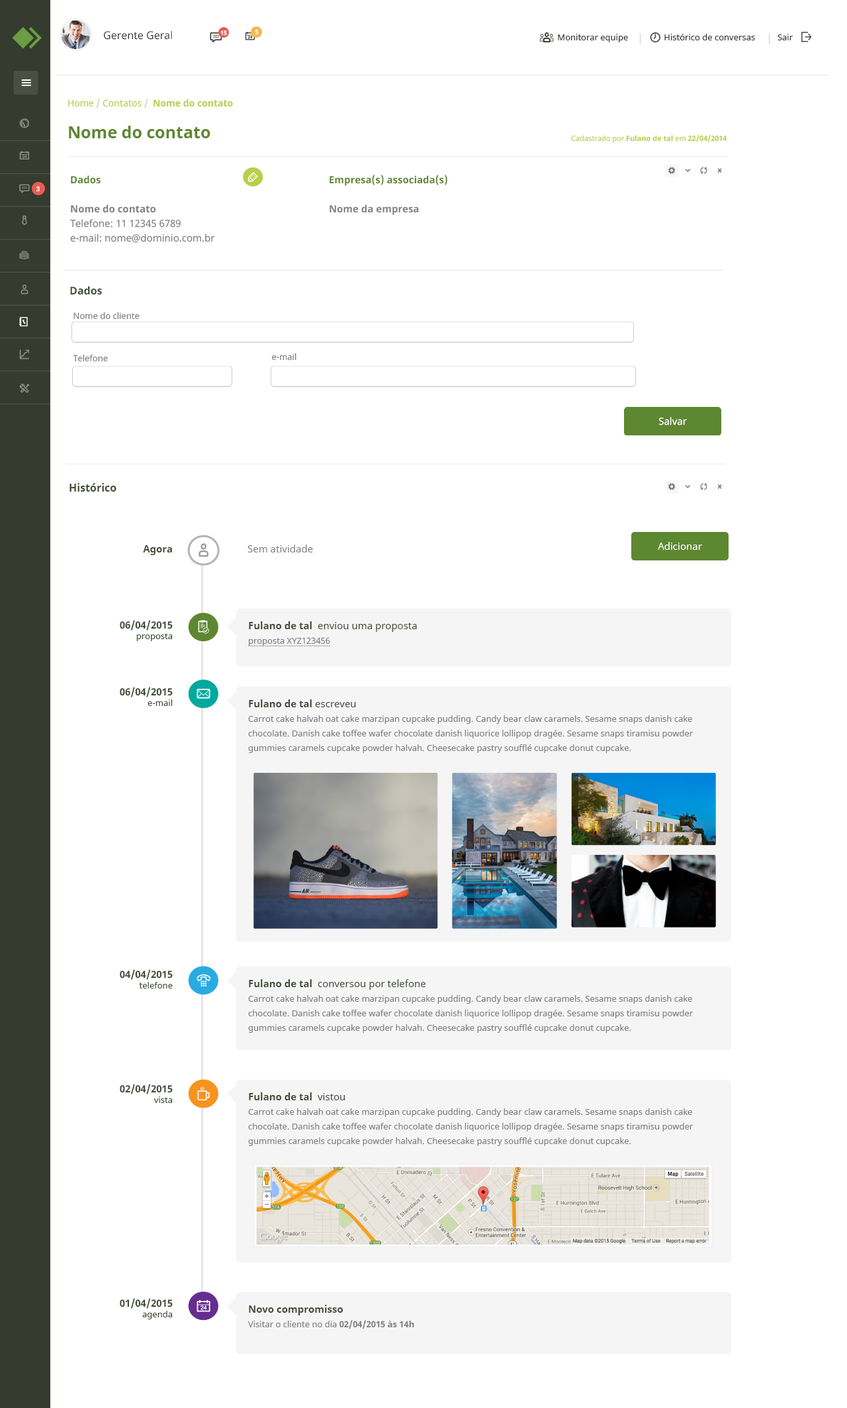
<style>
.page{position:relative;width:847px;height:1408px;background:#ffffff}
.page>*{position:absolute;margin:0}
.t1{font:6.6px "NotoSans-Bold";color:#ffffff}
.t2{font:10.6px "NotoSans";color:#353b2f}
.t3{font:6px "NotoSans-Bold";color:#ffffff}
.t4{font:8.6px "NotoSans";color:#353b2f}
.t5{font:9.3px "NotoSans-Bold";color:#b8cf49}
.t6{font:9.3px "NotoSans";color:#b8cf49}
.t7{font:9.3px "NotoSans";color:#c7cfa1}
.t8{font:16.5px "NotoSans-Bold";color:#5d8730}
.t9{font:7.3px "NotoSans";color:#b8cf49}
.t10{font:7.3px "NotoSans-Bold";color:#b8cf49}
.t11{font:9.9px/14.6px "NotoSans";color:#808080}
.t12{font:9.9px/14.6px "NotoSans-Bold";color:#5d8730}
.t13{font:9.9px/14.6px "NotoSans-Bold";color:#808080}
.t14{font:10.6px "NotoSans-Bold";color:#424d38}
.t15{font:8.6px/43px "NotoSans";color:#808080}
.t16{font:8.6px "NotoSans";color:#808080}
.t17{font:9.9px "NotoSans";color:#ffffff}
.t18{font:9.9px "NotoSans-Bold";color:#424d38}
.t19{font:9.9px "NotoSans";color:#808080}
.t20{font:8.6px "NotoSans";color:#424d38}
.t21{font:9.9px/14.6px "NotoSans";color:#424d38}
.t22{font:9.9px/14.6px "NotoSans-Bold";color:#424d38}
.t23{font:8.6px/14.6px "NotoSans";color:#808080;text-decoration:underline}
.t24{font:8.6px/14.6px "NotoSans";color:#808080}
.t25{font:8.6px/14.6px "NotoSans-Bold";color:#808080}
</style>
<div class="page">
<p class="t1" style="left:255px;top:29px;width:4px;height:6px">5</p>
<p class="t2" style="left:104px;top:30px;width:68px;height:10px">Gerente Geral</p>
<p class="t3" style="left:220px;top:30px;width:7px;height:6px">15</p>
<p class="t4" style="left:558px;top:34px;width:235px;height:8px">Monitorar equipe                Histórico de conversas          Sair</p>
<p class="t5" style="left:68px;top:99px;width:165px;height:10px"><span class="t6">Home </span><span class="t7">/</span><span class="t6"> Contatos </span><span class="t7">/  </span>Nome do contato</p>
<p class="t8" style="left:69px;top:126px;width:141px;height:12px">Nome do contato</p>
<p class="t9" style="left:571px;top:134px;width:156px;height:9px">Cadastrado por<span class="t10"> Fulano de tal </span>em<span class="t10"> 22/04/2014</span></p>
<p class="t1" style="left:36px;top:186px;width:4px;height:6px">3</p>
<p class="t11" style="left:70px;top:175px;width:145px;height:68px"><span class="t12">Dados<br><br></span><span class="t13">Nome do contato<br></span>Telefone: 11 12345 6789<br>e-mail: nome@dominio.com.br</p>
<p class="t12" style="left:330px;top:175px;width:117px;height:40px">Empresa(s) associada(s)<br><br><span class="t13">Nome da empresa</span></p>
<p class="t14" style="left:70px;top:286px;width:32px;height:9px">Dados</p>
<p class="t15" style="left:73px;top:312px;width:67px;height:50px">Nome do cliente<br>Telefone</p>
<p class="t16" style="left:272px;top:353px;width:24px;height:8px">e-mail</p>
<p class="t17" style="left:658px;top:417px;width:29px;height:8px">Salvar</p>
<p class="t14" style="left:69px;top:483px;width:47px;height:9px">Histórico</p>
<p class="t18" style="left:143px;top:545px;width:29px;height:10px">Agora</p>
<p class="t19" style="left:247px;top:545px;width:66px;height:7px">Sem atividade</p>
<p class="t17" style="left:658px;top:542px;width:44px;height:8px">Adicionar</p>
<p class="t18" style="left:120px;top:620px;width:53px;height:21px;text-align:right">06/04/2015<br><span class="t20">proposta</span></p>
<p class="t21" style="left:247px;top:621px;width:170px;height:25px"><span class="t22">Fulano de tal </span> enviou uma proposta<br><span class="t23">proposta XYZ123456</span></p>
<p class="t18" style="left:120px;top:687px;width:53px;height:19px;text-align:right">06/04/2015<br><span class="t20">e-mail</span></p>
<p class="t24" style="left:248px;top:699px;width:445px;height:54px"><span class="t22">Fulano de tal </span><span class="t21">escreveu<br></span>Carrot cake halvah oat cake marzipan cupcake pudding. Candy bear claw caramels. Sesame snaps danish cake chocolate. Danish cake toffee wafer chocolate danish liquorice lollipop dragée. Sesame snaps tiramisu powder gummies caramels cupcake powder halvah. Cheesecake pastry soufflé cupcake donut cupcake.</p>
<p class="t18" style="left:120px;top:969px;width:53px;height:20px;text-align:right">04/04/2015<br><span class="t20">telefone</span></p>
<p class="t24" style="left:248px;top:979px;width:445px;height:54px"><span class="t22">Fulano de tal </span><span class="t21"> conversou por telefone<br></span>Carrot cake halvah oat cake marzipan cupcake pudding. Candy bear claw caramels. Sesame snaps danish cake chocolate. Danish cake toffee wafer chocolate danish liquorice lollipop dragée. Sesame snaps tiramisu powder gummies caramels cupcake powder halvah. Cheesecake pastry soufflé cupcake donut cupcake.</p>
<p class="t18" style="left:120px;top:1084px;width:53px;height:19px;text-align:right">02/04/2015<br><span class="t20">vista</span></p>
<p class="t24" style="left:248px;top:1092px;width:445px;height:54px"><span class="t22">Fulano de tal </span><span class="t21"> vistou<br></span>Carrot cake halvah oat cake marzipan cupcake pudding. Candy bear claw caramels. Sesame snaps danish cake chocolate. Danish cake toffee wafer chocolate danish liquorice lollipop dragée. Sesame snaps tiramisu powder gummies caramels cupcake powder halvah. Cheesecake pastry soufflé cupcake donut cupcake.</p>
<p class="t18" style="left:120px;top:1298px;width:53px;height:21px;text-align:right">01/04/2015<br><span class="t20">agenda</span></p>
<p class="t24" style="left:248px;top:1305px;width:166px;height:24px"><span class="t22">Novo compromisso<br></span>Visitar o cliente no dia <span class="t25">02/04/2015 às 14h</span></p>
</div>
